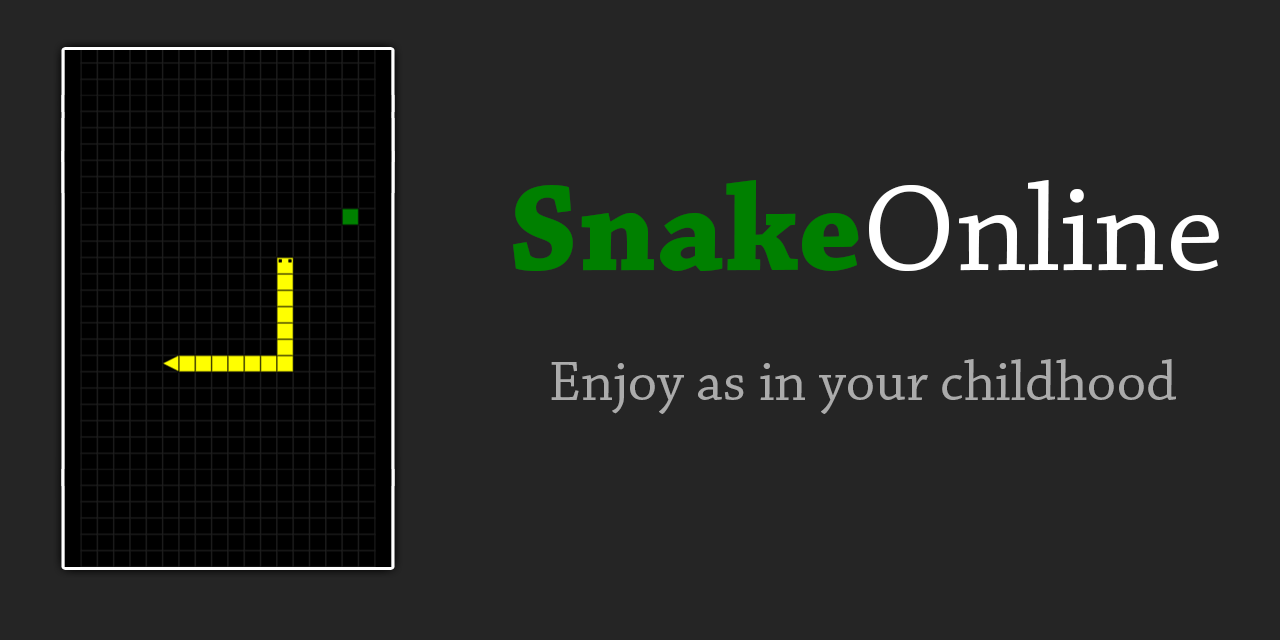
<style>
.page{position:relative;width:1280px;height:640px;background:#252525}
.page>*{position:absolute;margin:0}
.t1{font:220.7px "ChaparralPro-Regular";color:#ffffff}
.t2{font:220.7px "ChaparralPro-Bold";color:#008000}
.t3{font:99.5px "ChaparralPro-Regular";color:#ababab}
</style>
<div class="page">
<p class="t1" style="left:513px;top:180px;width:706px;height:91px"><span class="t2">Snake</span>Online</p>
<p class="t3" style="left:551px;top:359px;width:625px;height:55px">Enjoy as in your childhood</p>
</div>
